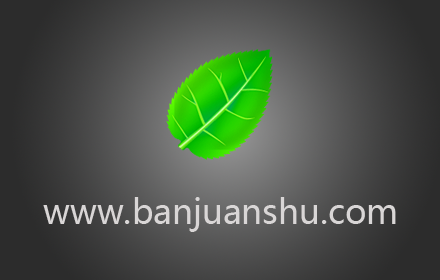
<style>
.page{position:relative;width:440px;height:280px}
.page>*{position:absolute;margin:0}
.t1{font:33.9px "MicrosoftYaHei";color:#d9d6d6}
</style>
<div class="page">
<p class="t1" style="left:43px;top:197px;width:353px;height:35px">www.banjuanshu.com</p>
</div>
